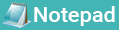
<style>
.page{position:relative;width:119px;height:30px;background:#43b5b5}
.page>*{position:absolute;margin:0}
.t1{font:21.3px "Roboto-Medium";color:#ffffff}
</style>
<div class="page">
<p class="t1" style="left:34px;top:6px;width:81px;height:20px">Notepad</p>
</div>
